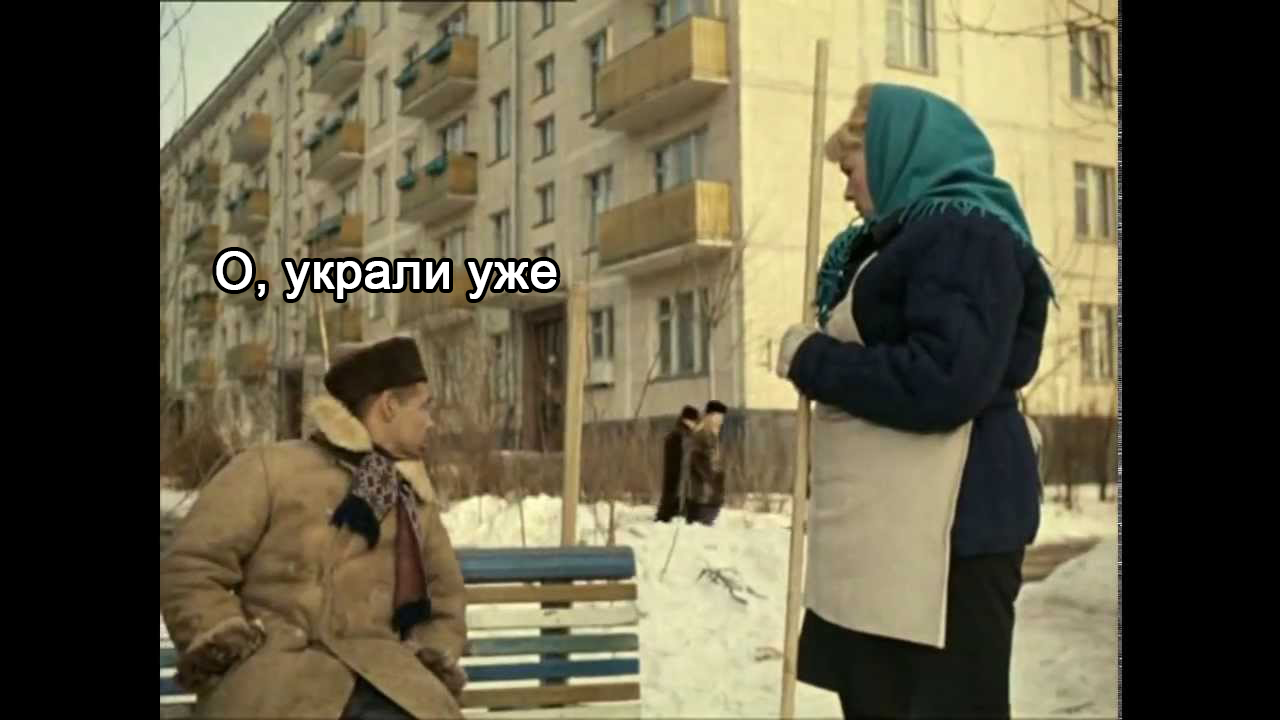
<style>
.page{position:relative;width:1280px;height:720px;background:#000000}
.page>*{position:absolute;margin:0}
.t1{font:50px "ArialMT";color:#ffffff;font-weight:bold}
</style>
<div class="page">
<p class="t1" style="left:216px;top:251px;width:341px;height:48px">О, украли уже</p>
</div>
